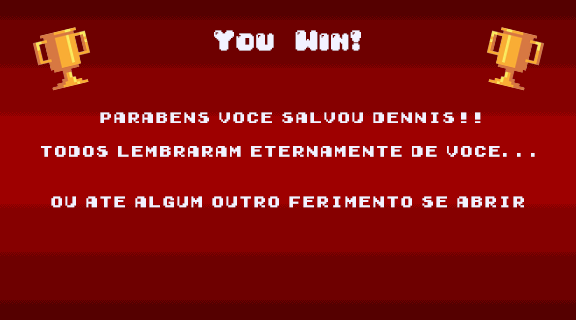
<style>
.page{position:relative;width:576px;height:320px;background:#6e0000}
.page>*{position:absolute;margin:0}
.t1{font:24px "04b30";color:#f2f2ff}
.t2{font:14px "Early-GameBoy";color:#f2f2ff}
</style>
<div class="page">
<p class="t1" style="left:214px;top:30px;width:147px;height:21px">You Win!</p>
<p class="t2" style="left:41px;top:112px;width:494px;height:96px;text-align:center">Parabens voce salvou Dennis!!<br><br>Todos lembraram eternamente de voce...<br><br><br>ou ate algum outro ferimento se abrir</p>
</div>
